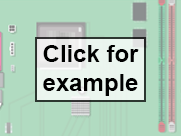
<style>
.page{position:relative;width:181px;height:136px;background:#b1dbc1}
.page>*{position:absolute;margin:0}
.t1{font:24px "Arial-BoldMT";color:#000000}
</style>
<div class="page">
<p class="t1" style="left:43px;top:45px;width:96px;height:51px;text-align:center">Click for <br>example</p>
</div>
